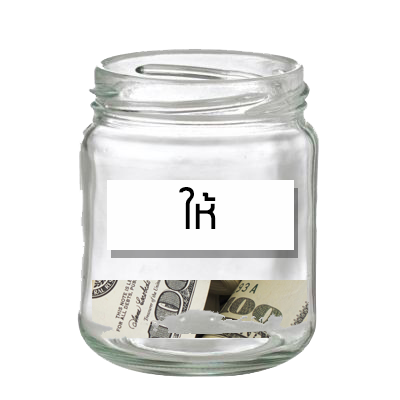
<style>
.page{position:relative;width:400px;height:400px;background:#ffffff}
.page>*{position:absolute;margin:0}
.t1{font:48px "supermarket";color:#000000}
</style>
<div class="page">
<p class="t1" style="left:179px;top:187px;width:37px;height:42px">ให้</p>
</div>
